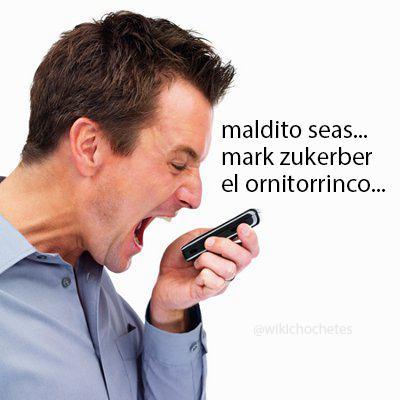
<style>
.page{position:relative;width:400px;height:400px;background:#fcfcfc}
.page>*{position:absolute;margin:0}
.t1{font:25.3px "MyriadPro-Regular";color:#000000}
.t2{font:14.8px "MyriadPro-Regular";color:#e7e7e7}
</style>
<div class="page">
<p class="t1" style="left:222px;top:120px;width:163px;height:72px">maldito seas...<br>mark zukerber<br>el ornitorrinco...</p>
<p class="t2" style="left:253px;top:323px;width:99px;height:13px">@wikichochetes</p>
</div>
